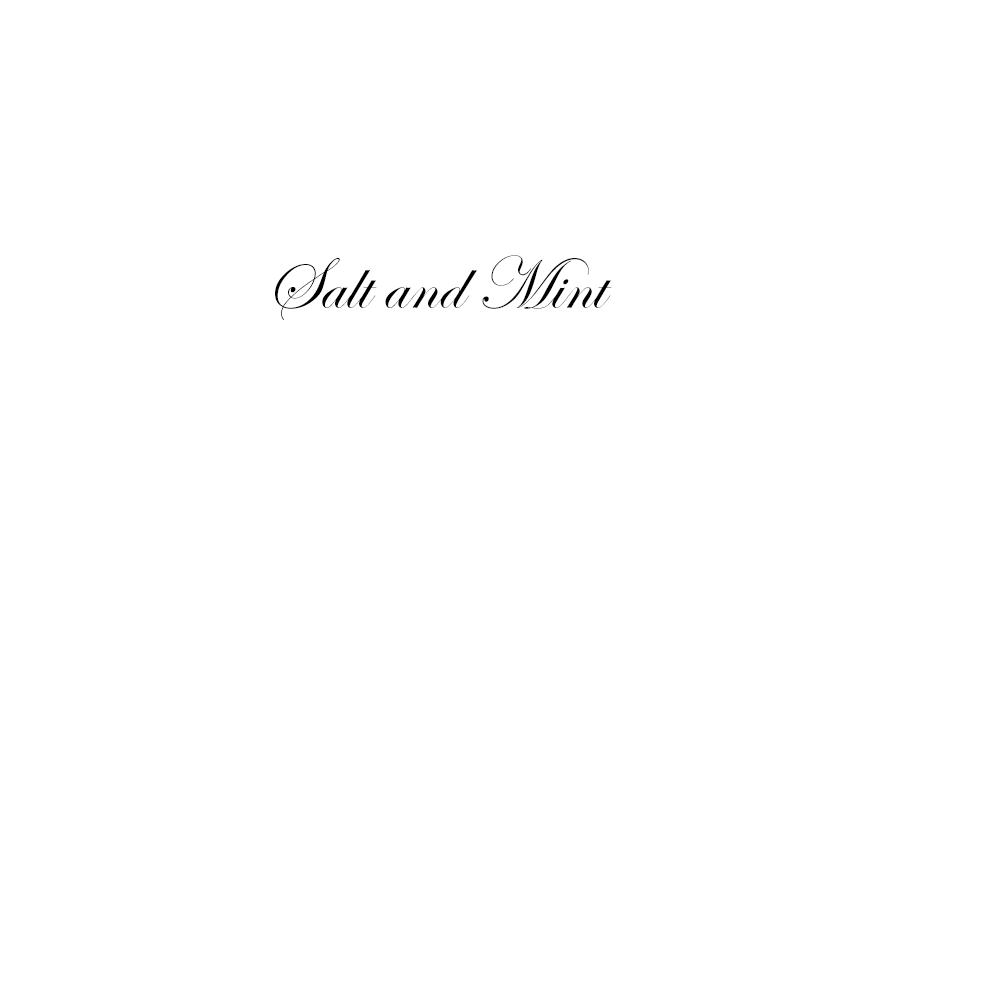
<style>
.page{position:relative;width:1000px;height:1000px;background:#ffffff}
.page>*{position:absolute;margin:0}
.t1{font:75px "EdwardianScriptITC";color:#000000}
</style>
<div class="page">
<p class="t1" style="left:275px;top:255px;width:337px;height:65px">Salt and Mint</p>
</div>
